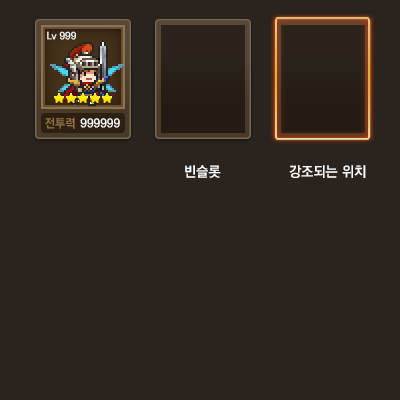
<style>
.page{position:relative;width:400px;height:400px;background:#2a231e}
.page>*{position:absolute;margin:0}
.t1{font:10px "KoPubDotumBold";color:#ffffff}
.t2{font:12px "KoPubDotumBold";color:#937441}
.t3{font:12px "KoPubDotumBold";color:#ffffff}
.t4{font:14px "KoPubDotumBold";color:#ffffff}
</style>
<div class="page">
<p class="t1" style="left:47px;top:31px;width:29px;height:9px">Lv 999</p>
<p class="t2" style="left:45px;top:117px;width:30px;height:12px">전투력</p>
<p class="t3" style="left:80px;top:118px;width:40px;height:10px">999999</p>
<p class="t4" style="left:185px;top:165px;width:36px;height:13px">빈슬롯</p>
<p class="t4" style="left:289px;top:165px;width:77px;height:13px">강조되는 위치</p>
</div>
